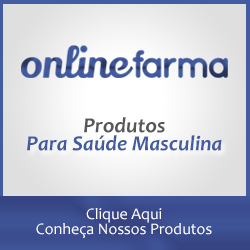
<style>
.page{position:relative;width:250px;height:250px}
.page>*{position:absolute;margin:0}
.t1{font:21.6px/18px "Candara-BoldItalic";color:#435ba1}
.t2{font:21.6px/18px "Candara-BoldItalic";color:#585859}
.t3{font:16px/15px "Candara";color:#ffffff}
</style>
<div class="page">
<p class="t1" style="left:27px;top:117px;width:195px;height:34px;text-align:center"><span class="t2">Produtos<br></span>Para Saúde Masculina</p>
<p class="t3" style="left:36px;top:208px;width:176px;height:30px;text-align:center">Clique Aqui<br>Conheça Nossos Produtos</p>
</div>
